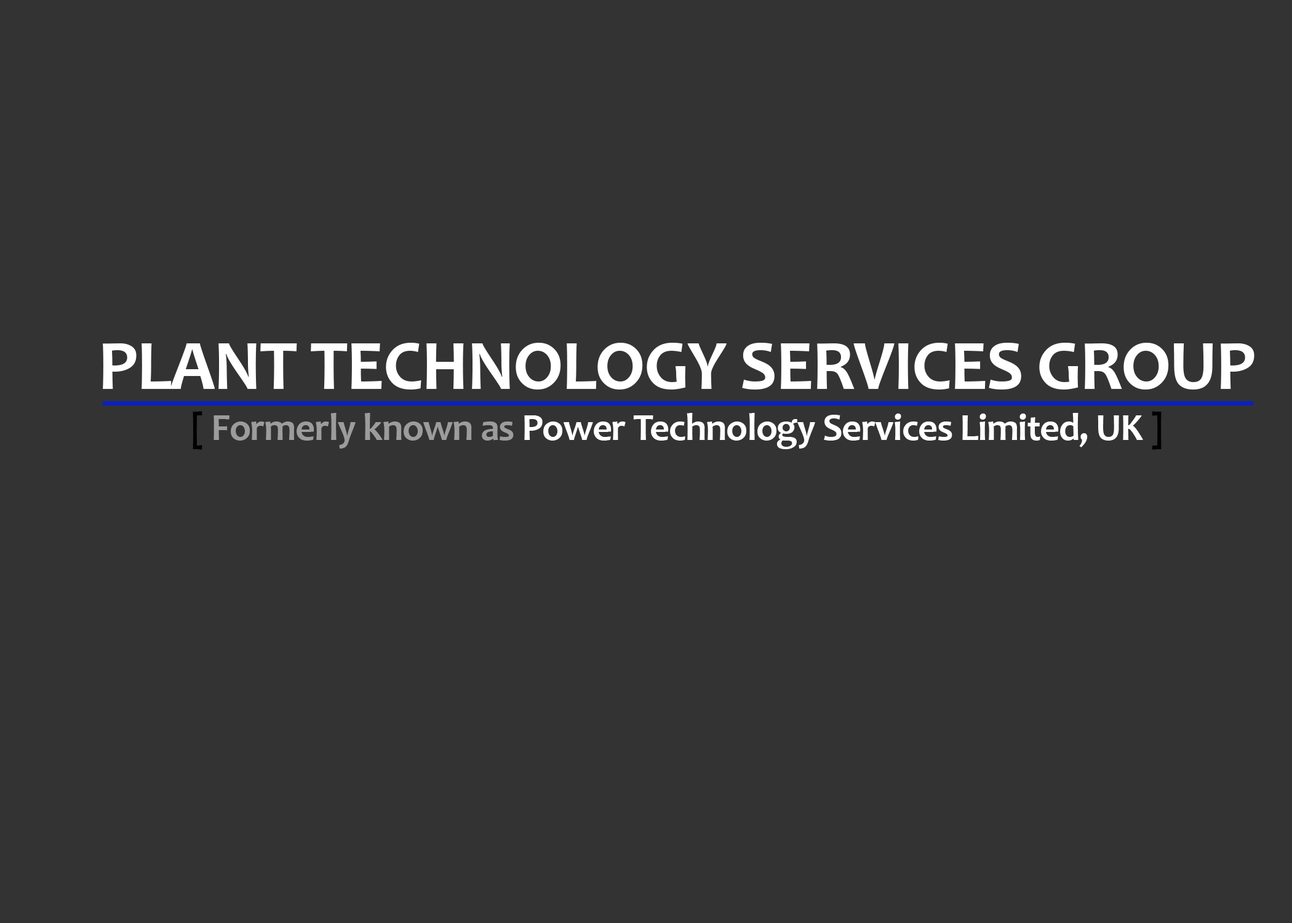
<style>
.page{position:relative;width:1292px;height:923px;background:#333333}
.page>*{position:absolute;margin:0}
.t1{font:71.8px "Candara-Bold";letter-spacing:-0.02em;color:#ffffff}
.t2{font:38.5px "Candara-Bold";letter-spacing:-0.02em;color:#ffffff}
.t3{font:38.5px "Candara-Bold";letter-spacing:-0.02em;color:#000000}
.t4{font:38.5px "Candara-Bold";letter-spacing:-0.02em;color:#9c9c9c}
</style>
<div class="page">
<p class="t1" style="left:103px;top:343px;width:1152px;height:46px">PLANT TECHNOLOGY SERVICES GROUP</p>
<p class="t2" style="left:193px;top:411px;width:969px;height:39px"><span class="t3">[ </span><span class="t4">Formerly known as </span>Power Technology Services Limited, UK <span class="t3">]</span></p>
</div>
